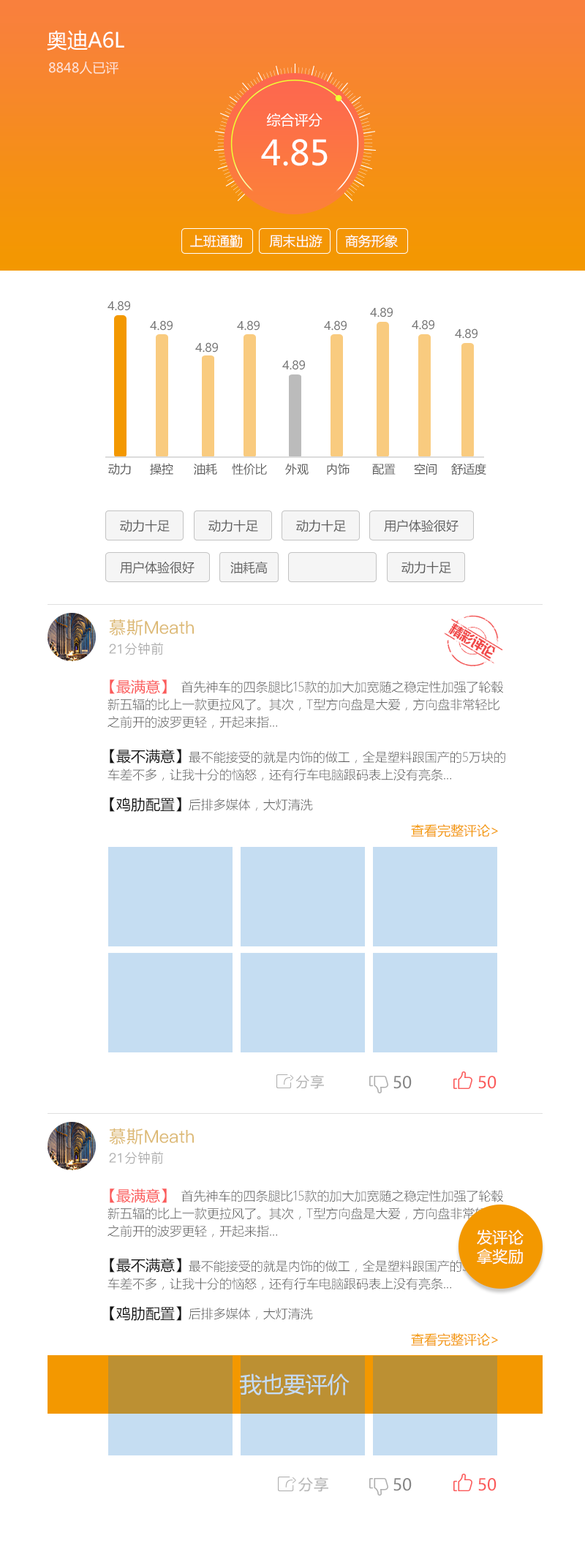
<style>
.page{position:relative;width:585px;height:1568px;background:#ffffff}
.page>*{position:absolute;margin:0}
.t1{font:20.5px "MicrosoftYaHei";color:#ffffff}
.t2{font:13.2px "MicrosoftYaHei";color:#fde1d3}
.t3{font:13.9px "MicrosoftYaHei";color:#ffffff}
.t4{font:34.2px "MicrosoftYaHei";color:#ffffff}
.t5{font:13.2px "MicrosoftYaHei";color:#ffffff}
.t6{font:11.7px "MicrosoftYaHei";color:#757575}
.t7{font:11.7px "MicrosoftYaHei";color:#5c5c5c}
.t8{font:12.4px "MicrosoftYaHei";color:#5c5c5c}
.t9{font:17.6px "PingFang-SC-Medium";color:#ddba76}
.t10{font:13.2px "¹ã½Ý¾ÓÃÔÄã×Ö¿â";letter-spacing:-0.05em;color:#f14a4a}
.t11{font:13.2px "PingFang-SC-Medium";color:#afafaf}
.t12{font:12.4px/17.6px "MicrosoftYaHeiLight";color:#5a5a5a}
.t13{font:14.6px "MicrosoftYaHei";color:#fb5b5b}
.t14{font:14.6px "MicrosoftYaHei";color:#131313}
.t15{font:12.4px "MicrosoftYaHeiLight";color:#5a5a5a}
.t16{font:13.2px "MicrosoftYaHei";color:#f39800}
.t17{font:14.6px "PingFang-SC-Medium";color:#afafaf}
.t18{font:16.1px "MicrosoftYaHei";color:#868686}
.t19{font:16.1px "MicrosoftYaHei";color:#fb5b5b}
.t20{font:15.6px/19.2px "MicrosoftYaHei";color:#ffffff}
.t21{font:21.9px "MicrosoftYaHei";color:#c5ddf2}
.t22{font:15.4px "PingFang-SC-Medium";color:#afafaf}
</style>
<div class="page">
<p class="t1" style="left:47px;top:30px;width:77px;height:20px">奥迪A6L</p>
<p class="t2" style="left:49px;top:61px;width:69px;height:14px">8848人已评</p>
<p class="t3" style="left:266px;top:113px;width:57px;height:14px">综合评分</p>
<p class="t4" style="left:261px;top:139px;width:67px;height:27px">4.85</p>
<p class="t5" style="left:190px;top:235px;width:52px;height:13px">上班通勤</p>
<p class="t5" style="left:269px;top:234px;width:54px;height:14px">周末出游</p>
<p class="t5" style="left:345px;top:235px;width:53px;height:13px">商务形象</p>
<p class="t6" style="left:108px;top:301px;width:22px;height:10px">4.89</p>
<p class="t6" style="left:370px;top:307px;width:23px;height:10px">4.89</p>
<p class="t6" style="left:150px;top:320px;width:23px;height:11px">4.89</p>
<p class="t6" style="left:237px;top:320px;width:23px;height:11px">4.89</p>
<p class="t6" style="left:324px;top:320px;width:23px;height:11px">4.89</p>
<p class="t6" style="left:412px;top:320px;width:22px;height:10px">4.89</p>
<p class="t6" style="left:455px;top:328px;width:23px;height:11px">4.89</p>
<p class="t6" style="left:195px;top:342px;width:23px;height:11px">4.89</p>
<p class="t6" style="left:282px;top:360px;width:23px;height:10px">4.89</p>
<p class="t7" style="left:108px;top:463px;width:23px;height:12px">动力</p>
<p class="t7" style="left:150px;top:463px;width:23px;height:12px">操控</p>
<p class="t7" style="left:194px;top:463px;width:23px;height:12px">油耗</p>
<p class="t7" style="left:232px;top:463px;width:35px;height:12px">性价比</p>
<p class="t7" style="left:285px;top:463px;width:24px;height:12px">外观</p>
<p class="t7" style="left:327px;top:463px;width:23px;height:12px">内饰</p>
<p class="t7" style="left:372px;top:464px;width:24px;height:11px">配置</p>
<p class="t7" style="left:414px;top:463px;width:23px;height:12px">空间</p>
<p class="t7" style="left:451px;top:463px;width:35px;height:12px">舒适度</p>
<p class="t8" style="left:120px;top:519px;width:50px;height:13px">动力十足</p>
<p class="t8" style="left:208px;top:519px;width:50px;height:13px">动力十足</p>
<p class="t8" style="left:296px;top:519px;width:50px;height:13px">动力十足</p>
<p class="t8" style="left:384px;top:519px;width:75px;height:13px">用户体验很好</p>
<p class="t8" style="left:120px;top:561px;width:75px;height:13px">用户体验很好</p>
<p class="t8" style="left:230px;top:561px;width:38px;height:13px">油耗高</p>
<p class="t8" style="left:402px;top:561px;width:49px;height:13px">动力十足</p>
<p class="t9" style="left:109px;top:619px;width:85px;height:17px">慕斯Meath</p>
<p class="t10" style="left:448px;top:623px;width:47px;height:36px;rotate:32deg">精彩评论</p>
<p class="t11" style="left:109px;top:642px;width:54px;height:13px">21分钟前</p>
<p class="t12" style="left:108px;top:681px;width:397px;height:100px">首先神车的四条腿比15款的加大加宽随之稳定性加强了轮毂<br>新五辐的比上一款更拉风了。其次，T型方向盘是大爱，方向盘非常轻比<br>之前开的波罗更轻，开起来指...<br><br>                      最不能接受的就是内饰的做工，全是塑料跟国产的5万块的<br>车差不多，让我十分的恼怒，还有行车电脑跟码表上没有亮条...</p>
<p class="t13" style="left:110px;top:679px;width:57px;height:15px">【最满意】</p>
<p class="t14" style="left:110px;top:749px;width:71px;height:15px">【最不满意】</p>
<p class="t14" style="left:110px;top:797px;width:71px;height:15px">【鸡肋配置】</p>
<p class="t15" style="left:189px;top:799px;width:124px;height:12px">后排多媒体，大灯清洗</p>
<p class="t16" style="left:411px;top:824px;width:87px;height:13px">查看完整评论&gt;</p>
<p class="t17" style="left:296px;top:1075px;width:28px;height:14px">分享</p>
<p class="t18" style="left:393px;top:1076px;width:19px;height:13px">50</p>
<p class="t19" style="left:478px;top:1076px;width:19px;height:13px">50</p>
<p class="t9" style="left:109px;top:1128px;width:85px;height:17px">慕斯Meath</p>
<p class="t11" style="left:109px;top:1151px;width:54px;height:13px">21分钟前</p>
<p class="t12" style="left:108px;top:1190px;width:397px;height:100px">首先神车的四条腿比15款的加大加宽随之稳定性加强了轮毂<br>新五辐的比上一款更拉风了。其次，T型方向盘是大爱，方向盘非常轻比<br>之前开的波罗更轻，开起来指...<br><br>                      最不能接受的就是内饰的做工，全是塑料跟国产的5万块的<br>车差不多，让我十分的恼怒，还有行车电脑跟码表上没有亮条...</p>
<p class="t13" style="left:110px;top:1188px;width:57px;height:15px">【最满意】</p>
<p class="t20" style="left:477px;top:1229px;width:47px;height:35px">发评论<br>拿奖励</p>
<p class="t14" style="left:110px;top:1258px;width:71px;height:15px">【最不满意】</p>
<p class="t14" style="left:110px;top:1306px;width:71px;height:15px">【鸡肋配置】</p>
<p class="t15" style="left:189px;top:1308px;width:124px;height:12px">后排多媒体，大灯清洗</p>
<p class="t16" style="left:411px;top:1333px;width:87px;height:13px">查看完整评论&gt;</p>
<p class="t21" style="left:240px;top:1373px;width:110px;height:22px">我也要评价</p>
<p class="t22" style="left:298px;top:1477px;width:30px;height:15px">分享</p>
<p class="t18" style="left:393px;top:1478px;width:19px;height:13px">50</p>
<p class="t19" style="left:478px;top:1478px;width:19px;height:13px">50</p>
</div>
